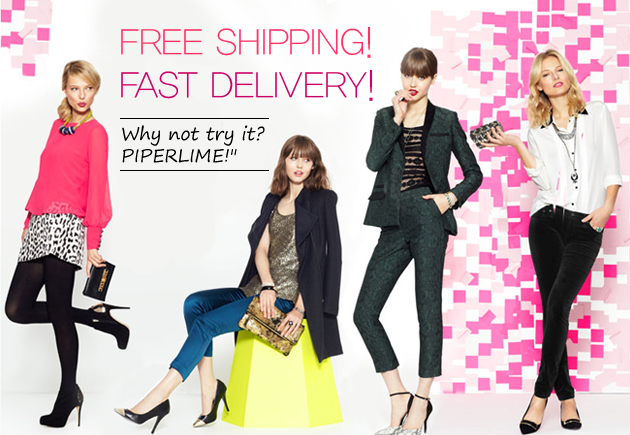
<style>
.page{position:relative;width:630px;height:435px}
.page>*{position:absolute;margin:0}
.t1{font:36px "YDIYGO310";color:#ff3366}
.t2{font:36px "YDIYGO310";color:#cc0066}
.t3{font:18px "SegoePrint";color:#000000}
</style>
<div class="page">
<p class="t1" style="left:121px;top:26px;width:252px;height:75px">FREE SHIPPING!<br><span class="t2">FAST DELIVERY!</span></p>
<p class="t3" style="left:122px;top:125px;width:143px;height:38px">Why not try it?<br>PIPERLIME!"</p>
</div>
